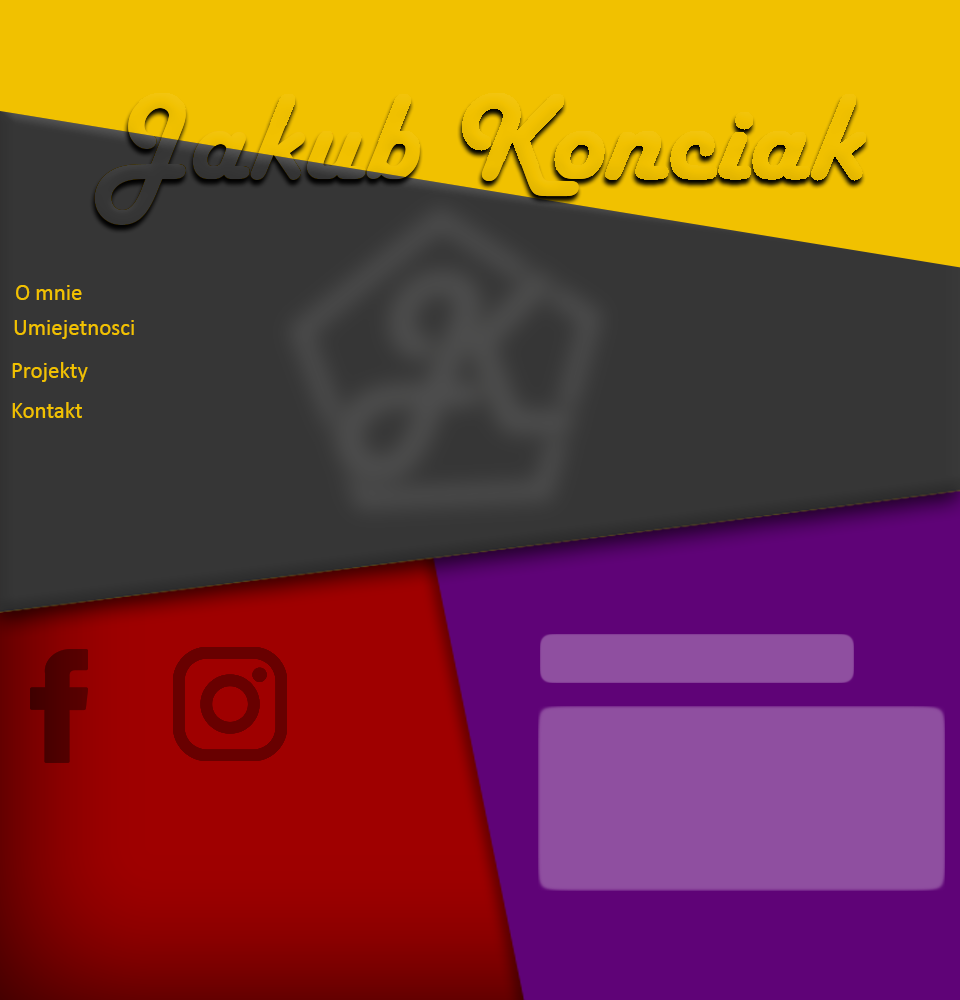
<style>
.page{position:relative;width:960px;height:1000px;background:#363636}
.page>*{position:absolute;margin:0}
.t1{font:22.9px "Calibri";color:#f1c100}
</style>
<div class="page">
<p class="t1" style="left:16px;top:285px;width:66px;height:15px">O mnie</p>
<p class="t1" style="left:14px;top:320px;width:120px;height:19px">Umiejetnosci</p>
<p class="t1" style="left:12px;top:362px;width:76px;height:20px">Projekty</p>
<p class="t1" style="left:12px;top:402px;width:70px;height:16px">Kontakt</p>
</div>
